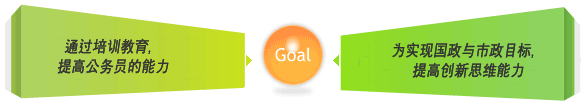
<style>
.page{position:relative;width:587px;height:107px;background:#ffffff}
.page>*{position:absolute;margin:0}
.t1{font:16px/20px "New-Gulim";color:#333333;font-weight:bold;font-style:italic;scale:0.85 1}
</style>
<div class="page">
<p class="t1" style="left:57px;top:38px;width:112px;height:36px;text-align:center">通过培训教育，<br>提高公务员的能力</p>
<p class="t1" style="left:392px;top:42px;width:142px;height:36px;text-align:center">为实现国政与市政目标，<br>提高创新思维能力</p>
</div>
